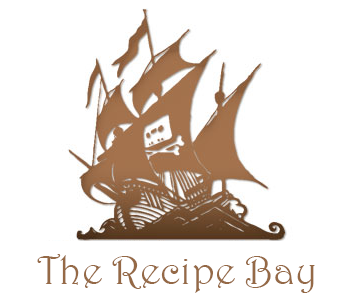
<style>
.page{position:relative;width:350px;height:295px;background:#ffffff}
.page>*{position:absolute;margin:0}
.t1{font:41px "Harrington";color:#956946}
</style>
<div class="page">
<p class="t1" style="left:37px;top:254px;width:278px;height:39px">The Recipe Bay</p>
</div>
